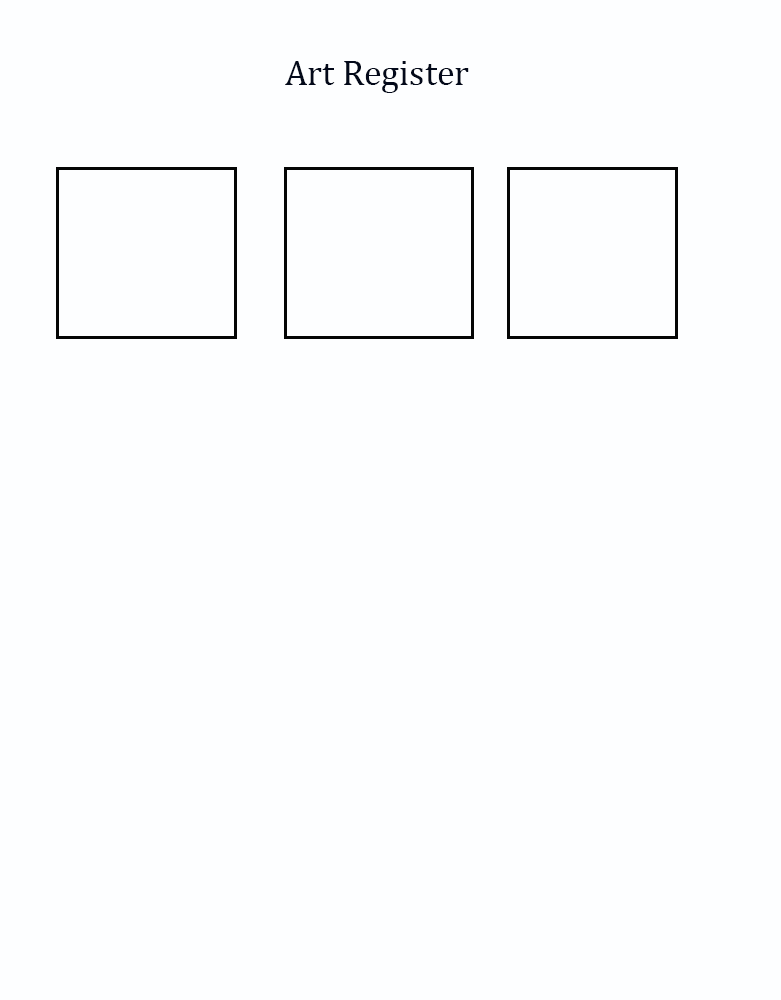
<style>
.page{position:relative;width:781px;height:1000px;background:#fdfeff}
.page>*{position:absolute;margin:0}
.t1{font:36px "Cambria";color:#03091a}
</style>
<div class="page">
<p class="t1" style="left:285px;top:61px;width:184px;height:32px">Art Register</p>
</div>
